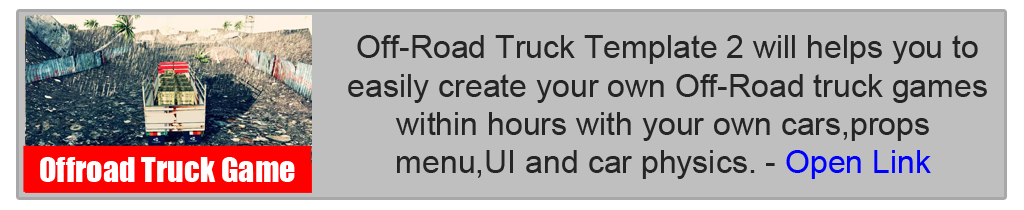
<style>
.page{position:relative;width:1024px;height:210px;background:#bfbfbf}
.page>*{position:absolute;margin:0}
.t1{font:32px "ArialMT";color:#252525}
.t2{font:32px "ArialMT";color:#0000ff}
.t3{font:32px "Impact";color:#ffffff}
</style>
<div class="page">
<p class="t1" style="left:348px;top:35px;width:639px;height:144px;text-align:center">Off-Road Truck Template 2 will helps you to <br>easily create your own Off-Road truck games <br>within hours with your own cars,props<br>menu,UI and car physics. - <span class="t2">Open Link</span></p>
<p class="t3" style="left:40px;top:157px;width:255px;height:25px">Offroad Truck Game</p>
</div>
